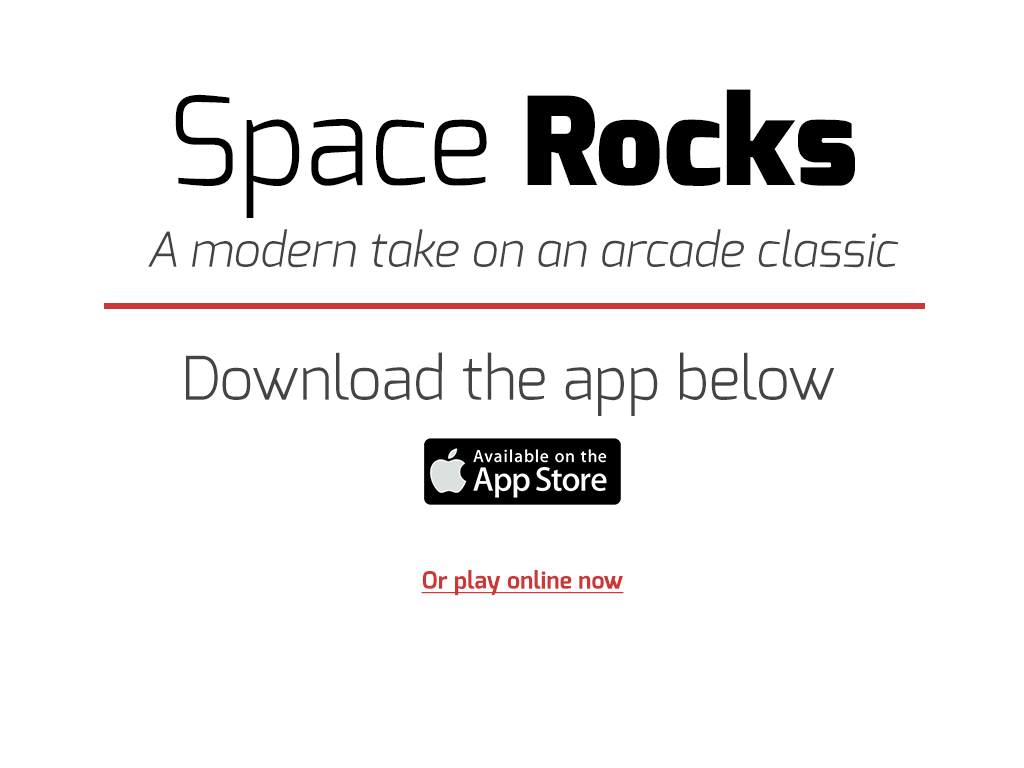
<style>
.page{position:relative;width:1024px;height:768px;background:#ffffff}
.page>*{position:absolute;margin:0}
.t1{font:122px "Exo-Light";color:#000000}
.t2{font:122px "Exo-Black";color:#000000}
.t3{font:48px "Exo-LightItalic";color:#444444}
.t4{font:60px "Exo-Light";color:#444444}
.t5{font:24px "Exo-Bold";color:#cb3836;text-decoration:underline}
</style>
<div class="page">
<p class="t1" style="left:175px;top:89px;width:680px;height:129px">Space<span class="t2"> Rocks</span></p>
<p class="t3" style="left:148px;top:229px;width:751px;height:39px">A modern take on an arcade classic</p>
<p class="t4" style="left:186px;top:352px;width:649px;height:64px">Download the app below</p>
<p class="t5" style="left:421px;top:570px;width:203px;height:26px">Or play online now</p>
</div>
